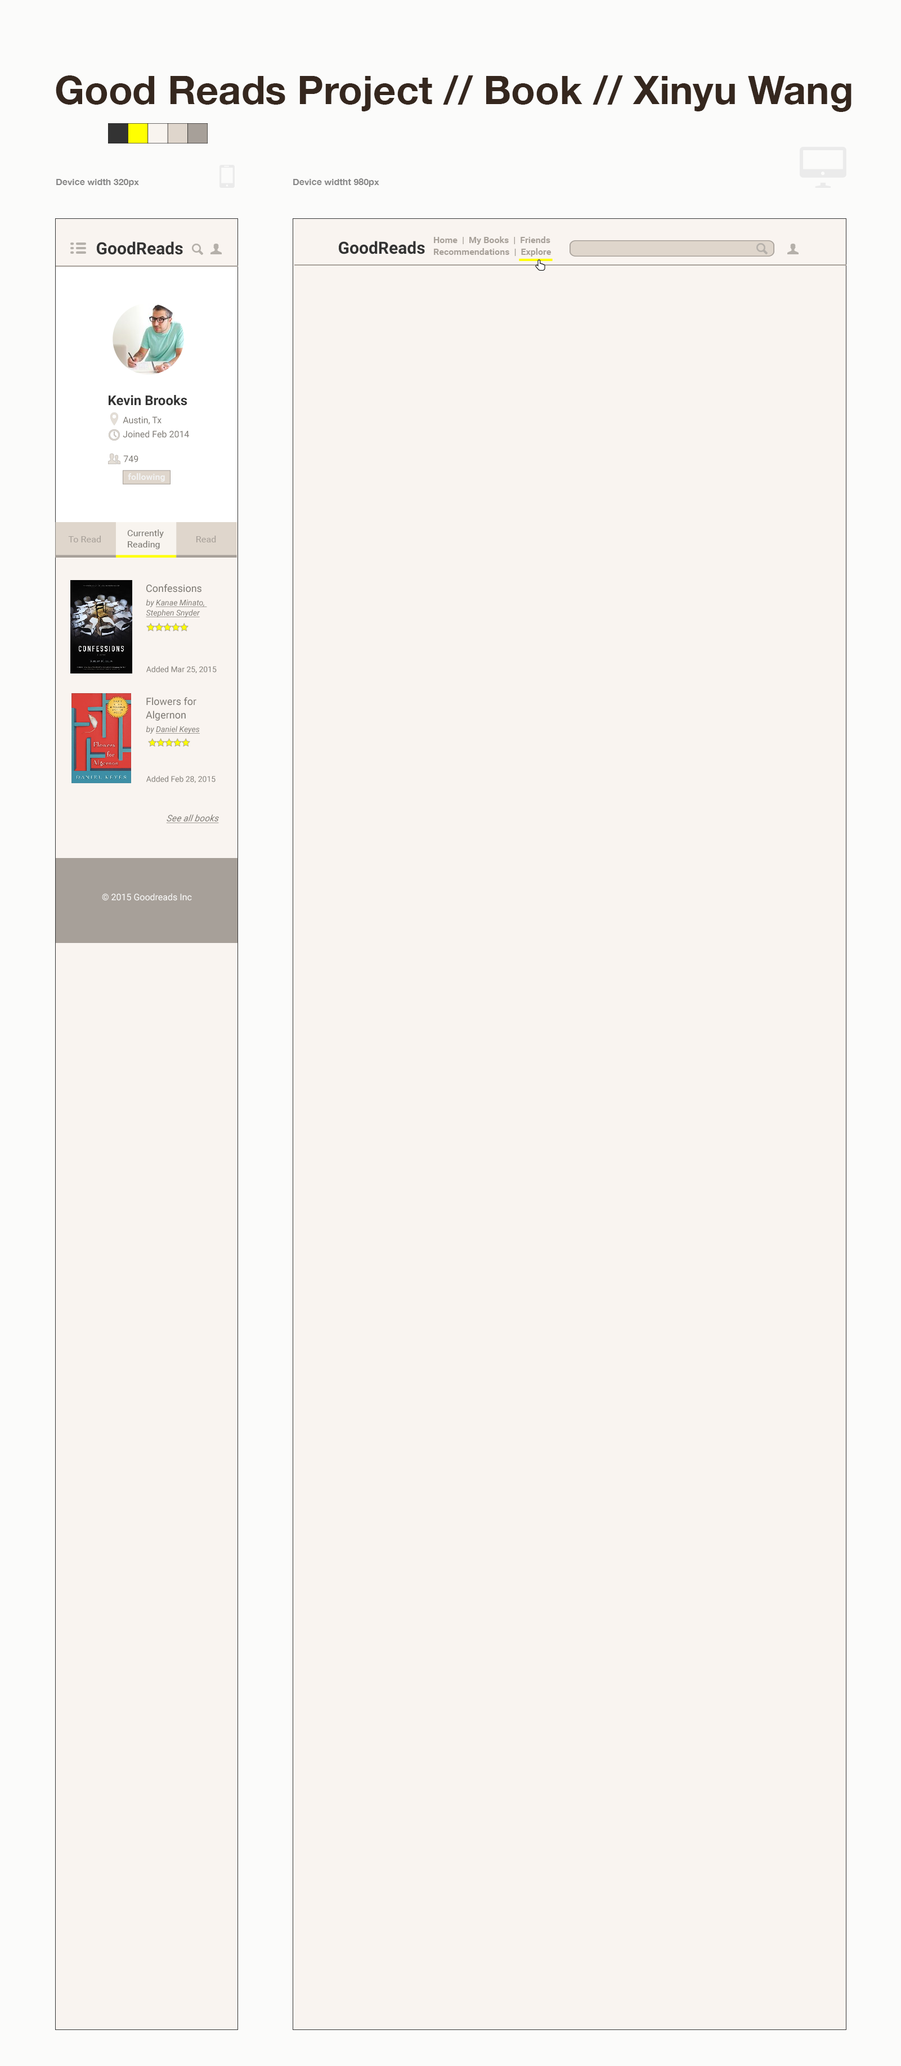
<style>
.page{position:relative;width:901px;height:2066px;background:#f9f4f0}
.page>*{position:absolute;margin:0}
.t1{font:39.4px "HelveticaNeue-Bold";color:#35271e}
.t2{font:9px "HelveticaNeue-Bold";color:#878787}
.t3{font:16.9px "Roboto-Bold";color:#333333}
.t4{font:13.5px "Roboto-Bold";color:#333333}
.t5{font:9px/14.1px "Roboto-Regular";color:#7d7973}
.t6{font:9px "Roboto-Regular";color:#7d7973}
.t7{font:10.1px "Roboto-Regular";color:#7d7973}
.t8{font:7.9px/10.1px "Roboto-Italic";color:#7d7973;text-decoration:underline}
.t9{font:7.9px/10.1px "Roboto-Italic";color:#7d7973}
.t10{font:7.9px "Roboto-Regular";color:#7d7973}
.t11{font:10.1px/13.5px "Roboto-Regular";color:#7d7973}
.t12{font:7.9px "Roboto-Italic";color:#7d7973;text-decoration:underline}
.t13{font:7.9px "Roboto-Italic";color:#7d7973}
.t14{font:9px "Roboto-Italic";color:#7d7973;font-style:italic;text-decoration:underline}
.t15{font:9px "Roboto-Regular";color:#fcfcfb}
</style>
<div class="page">
<p class="t1" style="left:56px;top:75px;width:795px;height:37px">Good Reads Project // Book // Xinyu Wang</p>
<p class="t2" style="left:56px;top:179px;width:83px;height:8px">Device width 320px</p>
<p class="t2" style="left:293px;top:178px;width:86px;height:9px">Device widtht 980px</p>
<p class="t3" style="left:97px;top:241px;width:86px;height:14px">GoodReads</p>
<p class="t3" style="left:339px;top:241px;width:86px;height:13px">GoodReads</p>
<p class="t4" style="left:109px;top:395px;width:78px;height:11px">Kevin Brooks</p>
<p class="t5" style="left:123px;top:416px;width:66px;height:22px">Austin, Tx<br>Joined Feb 2014</p>
<p class="t6" style="left:123px;top:455px;width:15px;height:7px">749</p>
<p class="t7" style="left:146px;top:584px;width:55px;height:8px">Confessions</p>
<p class="t8" style="left:146px;top:599px;width:61px;height:18px"><span class="t9">by </span>Kanae Minato, <br>Stephen Snyder</p>
<p class="t10" style="left:146px;top:666px;width:71px;height:7px">Added Mar 25, 2015</p>
<p class="t11" style="left:146px;top:697px;width:50px;height:24px">Flowers for <br>Algernon</p>
<p class="t12" style="left:146px;top:726px;width:54px;height:8px"><span class="t13">by </span>Daniel Keyes</p>
<p class="t10" style="left:146px;top:776px;width:69px;height:7px">Added Feb 28, 2015</p>
<p class="t14" style="left:166px;top:814px;width:53px;height:9px">See all books</p>
<p class="t15" style="left:102px;top:893px;width:90px;height:8px">© 2015 Goodreads Inc</p>
</div>
